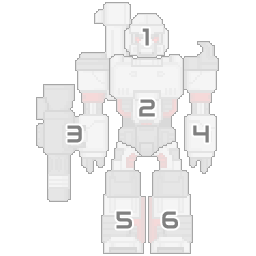
<style>
.page{position:relative;width:256px;height:256px;background:#ffffff}
.page>*{position:absolute;margin:0}
.t1{font:24px "Audiowide-Regular";color:#808080}
</style>
<div class="page">
<p class="t1" style="left:142px;top:28px;width:7px;height:18px">1</p>
<p class="t1" style="left:139px;top:99px;width:16px;height:18px">2</p>
<p class="t1" style="left:67px;top:125px;width:15px;height:18px">3</p>
<p class="t1" style="left:193px;top:125px;width:16px;height:18px">4</p>
<p class="t1" style="left:116px;top:211px;width:16px;height:18px">5</p>
<p class="t1" style="left:162px;top:211px;width:16px;height:18px">6</p>
</div>
